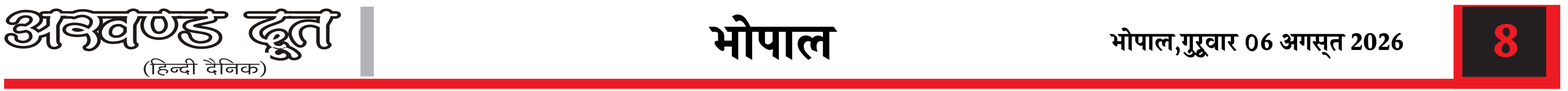
<style>
.page{position:relative;width:1568px;height:91px;background:#ffffff}
.page>*{position:absolute;margin:0}
.t1{font:49.1px "Halant-Bold";color:#000000}
.t2{font:25.4px "Halant-Bold";color:#000000}
.t3{font:49.1px "Halant-Bold";color:#ed1c24}
</style>
<div class="page">
<p class="t1" style="left:708px;top:14px;width:130px;height:46px">भोपाल</p>
<p class="t2" style="left:1109px;top:28px;width:294px;height:31px">भोपाल,गुरूुवार ०6 अगस्त 2026</p>
<p class="t3" style="left:1494px;top:24px;width:24px;height:33px">8</p>
</div>
